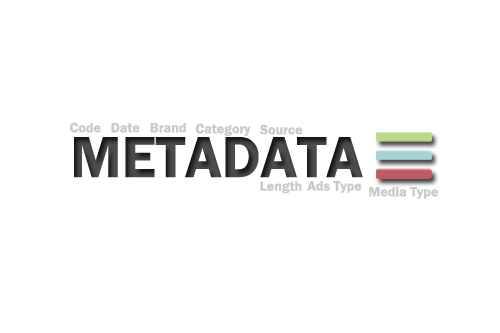
<style>
.page{position:relative;width:500px;height:333px;background:#ffffff}
.page>*{position:absolute;margin:0}
.t1{font:14px "FranklinGothic-Demi";color:#c6ccc8}
.t2{font:60px "FranklinGothic-Demi";color:#4a4d4b}
</style>
<div class="page">
<p class="t1" style="left:70px;top:122px;width:31px;height:11px">Code</p>
<p class="t1" style="left:111px;top:123px;width:29px;height:10px">Date</p>
<p class="t1" style="left:150px;top:123px;width:36px;height:10px">Brand</p>
<p class="t1" style="left:195px;top:123px;width:56px;height:13px">Category</p>
<p class="t1" style="left:259px;top:124px;width:44px;height:11px">Source</p>
<p class="t2" style="left:74px;top:137px;width:289px;height:41px">METADATA</p>
<p class="t1" style="left:260px;top:181px;width:42px;height:13px">Length</p>
<p class="t1" style="left:307px;top:181px;width:55px;height:12px">Ads Type</p>
<p class="t1" style="left:369px;top:186px;width:69px;height:13px">Media Type</p>
</div>
